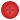
<style>
.page{position:relative;width:20px;height:20px;background:#ffffff}
.page>*{position:absolute;margin:0}
.t1{font:16px "Arial-BoldMT";color:#b93b3b}
</style>
<div class="page">
<p class="t1" style="left:5px;top:6px;width:9px;height:8px">+</p>
</div>
